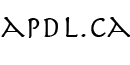
<style>
.page{position:relative;width:130px;height:65px;background:#ffffff}
.page>*{position:absolute;margin:0}
.t1{font:32px "Herculanum";color:#000000}
</style>
<div class="page">
<p class="t1" style="left:1px;top:17px;width:130px;height:21px">aPDL.Ca</p>
</div>
